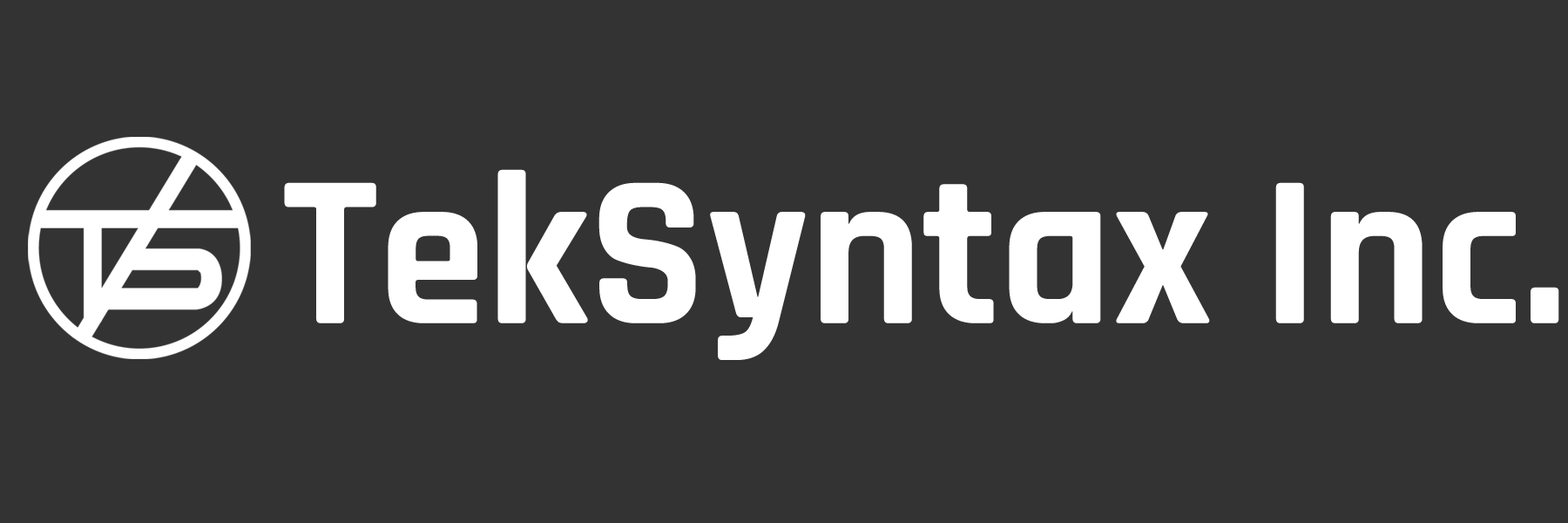
<style>
.page{position:relative;width:1568px;height:523px;background:#333333}
.page>*{position:absolute;margin:0}
.t1{font:217.8px "Rajdhani-Bold";color:#ffffff}
</style>
<div class="page">
<p class="t1" style="left:284px;top:169px;width:1275px;height:191px">TekSyntax Inc.</p>
</div>
